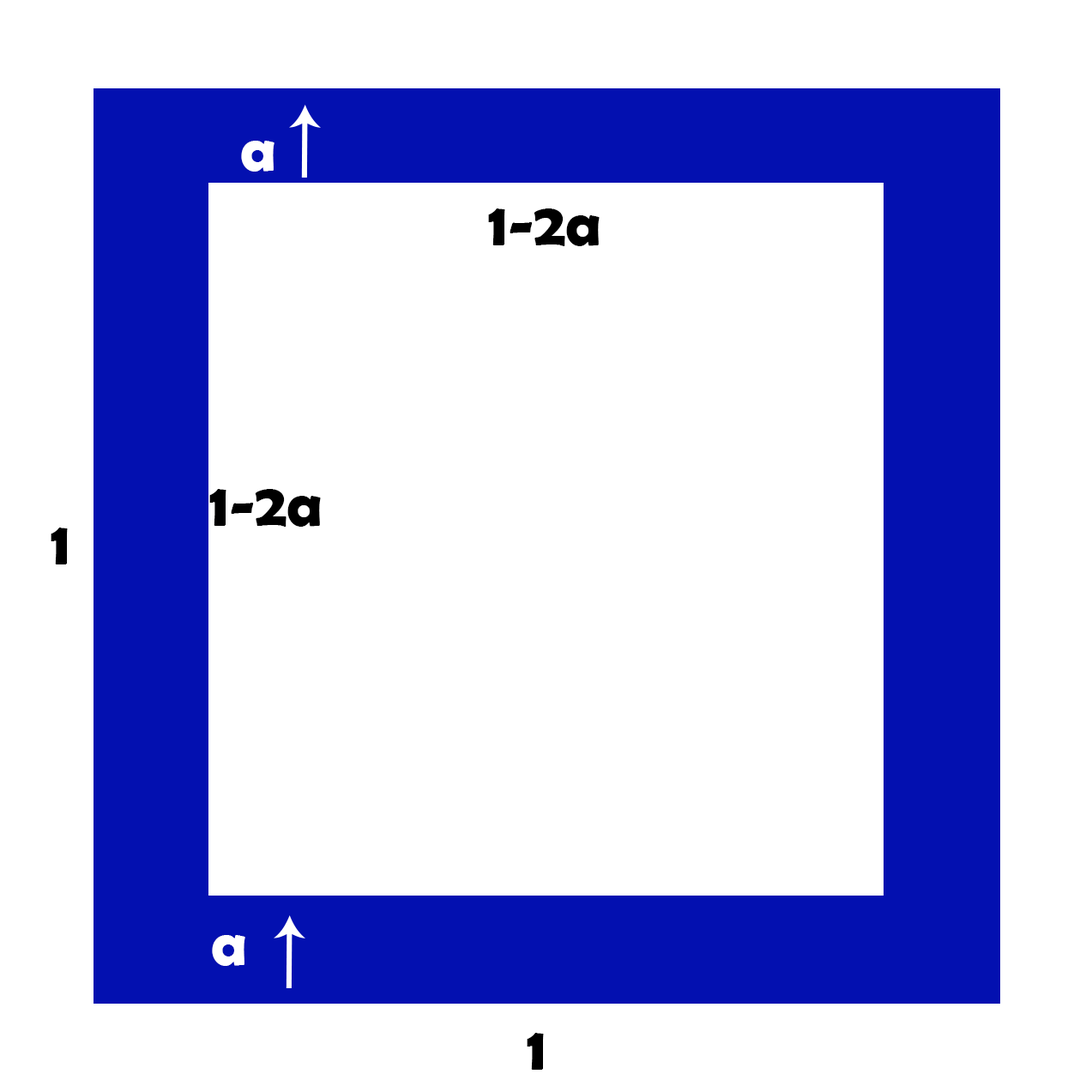
<style>
.page{position:relative;width:1092px;height:1092px;background:#ffffff}
.page>*{position:absolute;margin:0}
.t1{font:61.8px "BerlinSansFBDemi-Bold";color:#ffffff}
.t2{font:61.8px "BerlinSansFBDemi-Bold";color:#000000}
</style>
<div class="page">
<p class="t1" style="left:241px;top:141px;width:33px;height:31px">a</p>
<p class="t2" style="left:488px;top:208px;width:112px;height:38px">1-2a</p>
<p class="t2" style="left:209px;top:489px;width:112px;height:38px">1-2a</p>
<p class="t2" style="left:51px;top:528px;width:17px;height:36px">1</p>
<p class="t1" style="left:212px;top:935px;width:33px;height:31px">a</p>
<p class="t2" style="left:527px;top:1033px;width:17px;height:37px">1</p>
</div>
